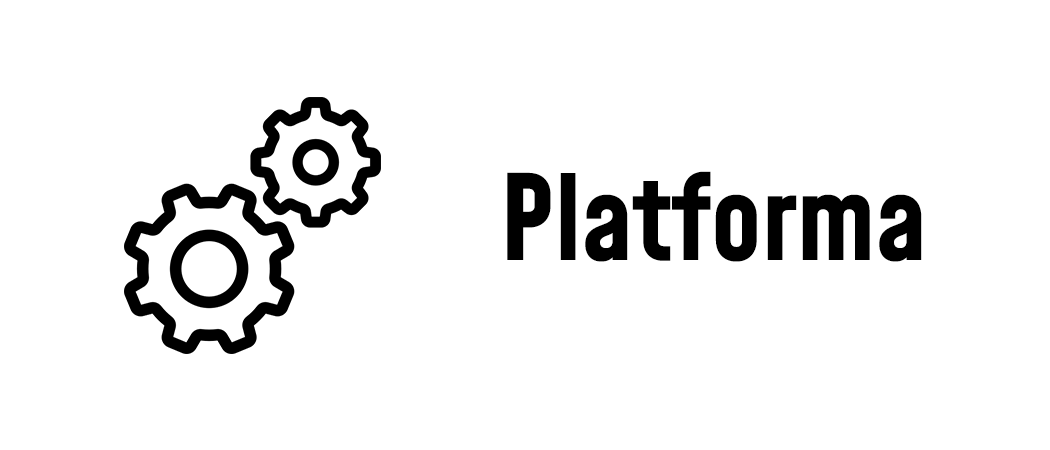
<style>
.page{position:relative;width:1050px;height:450px;background:#ffffff}
.page>*{position:absolute;margin:0}
.t1{font:116px "Mohave-Bold";color:#000000}
</style>
<div class="page">
<p class="t1" style="left:507px;top:171px;width:415px;height:91px">Platforma</p>
</div>
